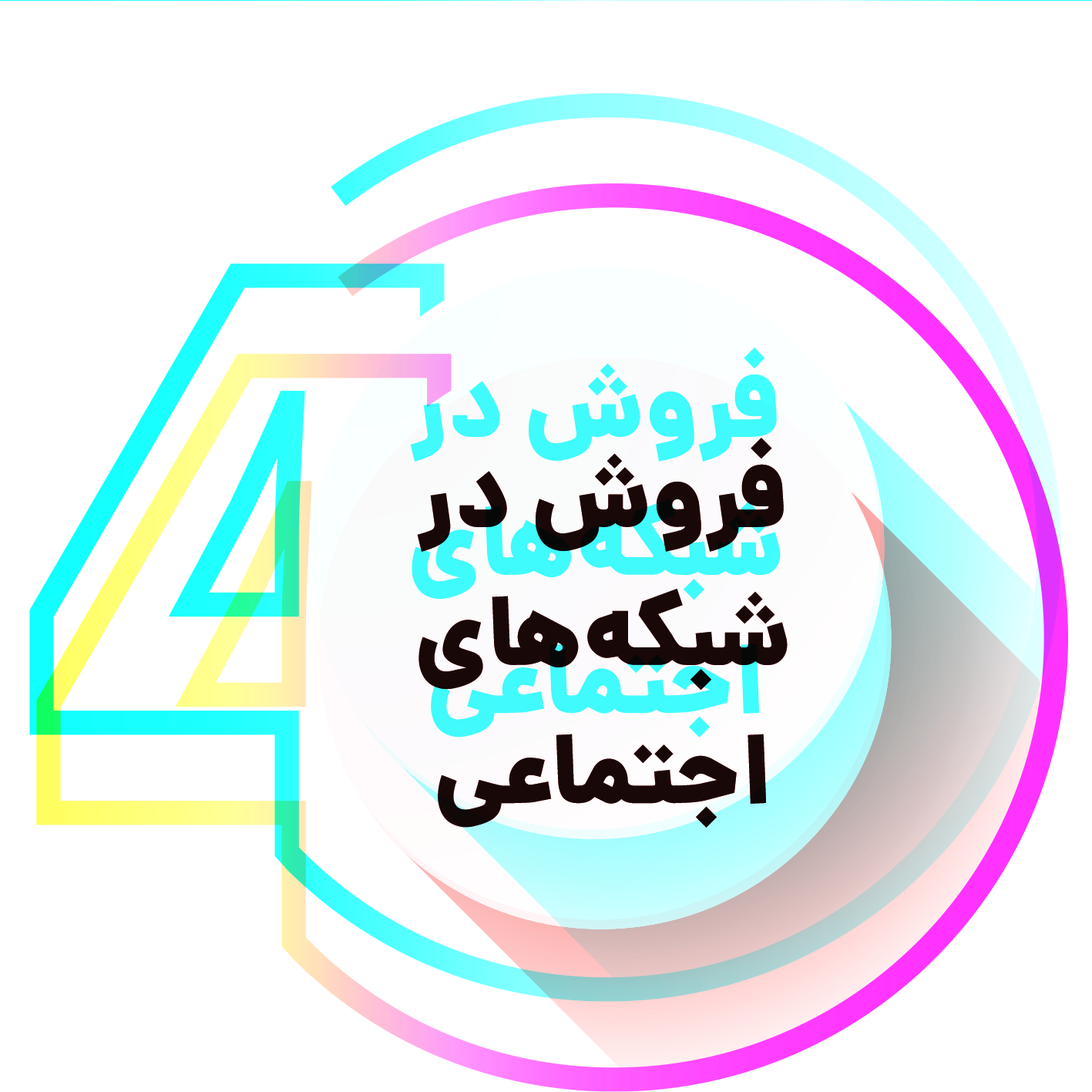
<style>
.page{position:relative;width:1092px;height:1092px;background:#ffffff}
.page>*{position:absolute;margin:0}
.t1{font:96.3px/138.1px "Dana-Black";color:#40fafc}
</style>
<div class="page">
<p class="t1" style="left:410px;top:347px;width:371px;height:390px;text-align:center">فروش در شبکه‌های اجتماعی</p>
</div>
